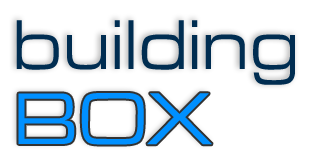
<style>
.page{position:relative;width:313px;height:164px;background:#ffffff}
.page>*{position:absolute;margin:0}
.t1{font:68.7px "BrinkExtended";letter-spacing:-0.03em;color:#002d51}
.t2{font:72px "BrinkExtended";letter-spacing:-0.03em;color:#0090ff}
</style>
<div class="page">
<p class="t1" style="left:16px;top:20px;width:279px;height:65px">building</p>
<p class="t2" style="left:18px;top:93px;width:194px;height:52px">BOX</p>
</div>
